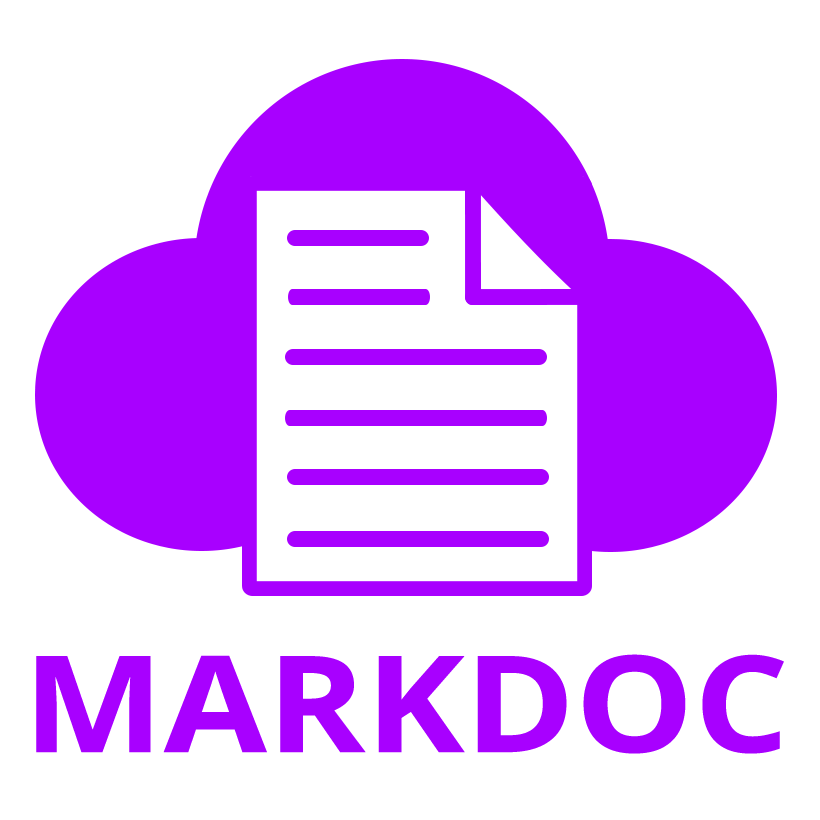
<style>
.page{position:relative;width:820px;height:820px;background:#ffffff}
.page>*{position:absolute;margin:0}
.t1{font:134.3px "RODENotoSansHindiB-Bold";color:#a800ff;scale:1.11 1}
</style>
<div class="page">
<p class="t1" style="left:36px;top:654px;width:748px;height:100px">MARKDOC</p>
</div>
